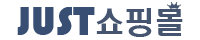
<style>
.page{position:relative;width:200px;height:40px;background:#ffffff}
.page>*{position:absolute;margin:0}
.t1{font:42px "Bauhaus93";color:#384f73}
.t2{font:30px "H2hdrM";color:#455570}
</style>
<div class="page">
<p class="t1" style="left:17px;top:7px;width:78px;height:28px">JUST</p>
<p class="t2" style="left:96px;top:8px;width:87px;height:29px">쇼핑몰</p>
</div>
